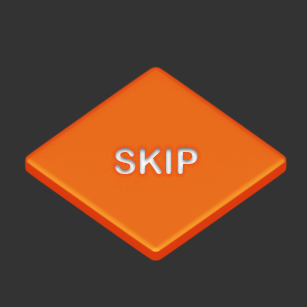
<style>
.page{position:relative;width:307px;height:307px;background:#333333}
.page>*{position:absolute;margin:0}
.t1{font:35.9px "ArialRoundedMTBold"}
</style>
<div class="page">
<p class="t1" style="left:114px;top:148px;width:84px;height:26px">SKIP</p>
</div>
